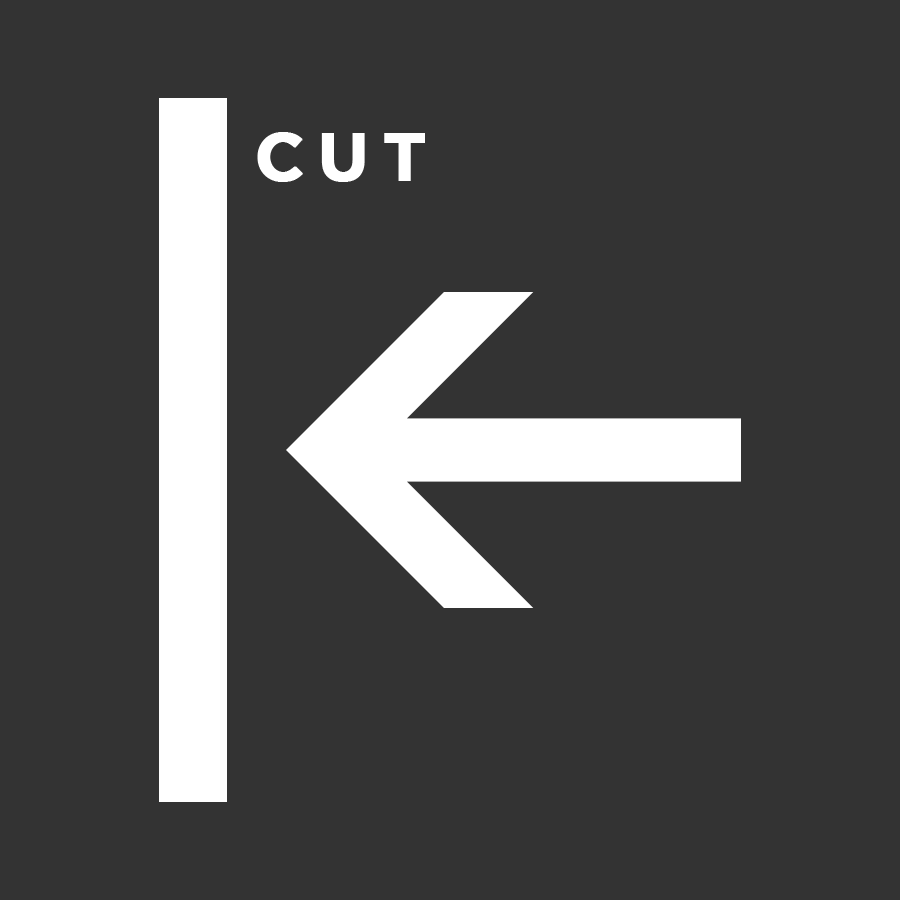
<style>
.page{position:relative;width:900px;height:900px;background:#333333}
.page>*{position:absolute;margin:0}
.t1{font:67.3px "Gotham-Bold";letter-spacing:0.18em;color:#ffffff;font-weight:bold}
</style>
<div class="page">
<p class="t1" style="left:257px;top:132px;width:168px;height:50px">CUT</p>
</div>
